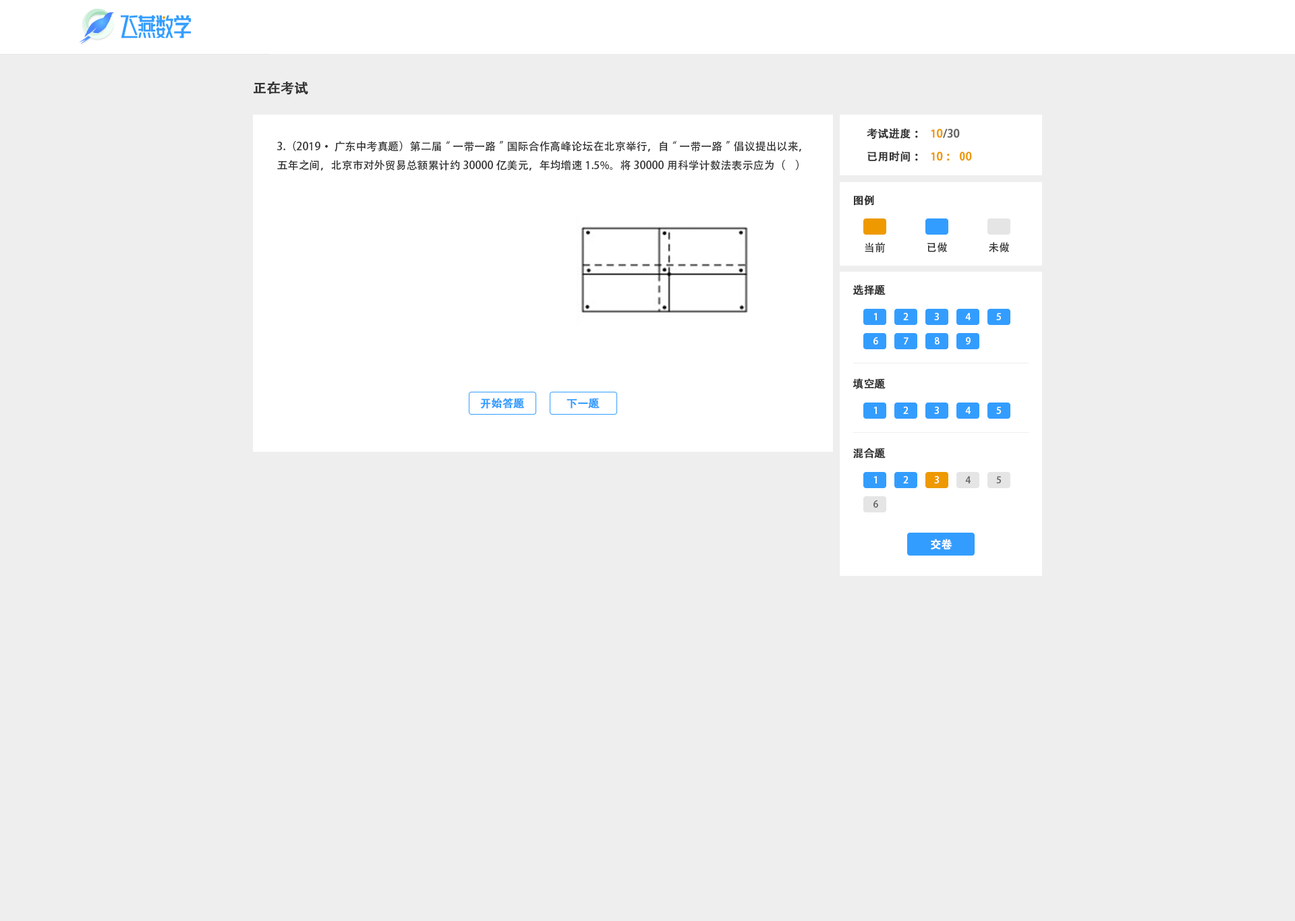
<style>
.page{position:relative;width:1295px;height:921px;background:#eeeeee}
.page>*{position:absolute;margin:0}
.t1{font:13.5px "AdobeHeitiStd-Regular";color:#333333;font-weight:bold}
.t2{font:10.8px "AdobeHeitiStd-Regular";color:#333333;font-weight:bold}
.t3{font:10.8px "AdobeHeitiStd-Regular";color:#666666;font-weight:bold}
.t4{font:10.8px "AdobeHeitiStd-Regular";color:#ee9900;font-weight:bold}
.t5{font:10.8px "AdobeHeitiStd-Regular";color:#333333}
.t6{font:9.4px "AdobeHeitiStd-Regular";color:#ffffff}
.t7{font:10.8px "AdobeHeitiStd-Regular";color:#339dff;font-weight:bold}
.t8{font:9.4px "AdobeHeitiStd-Regular";color:#666666}
.t9{font:10.8px "AdobeHeitiStd-Regular";color:#ffffff;font-weight:bold}
</style>
<div class="page">
<p class="t1" style="left:254px;top:81px;width:54px;height:14px">正在考试</p>
<p class="t2" style="left:866px;top:128px;width:52px;height:12px">考试进度：</p>
<p class="t3" style="left:931px;top:129px;width:29px;height:9px"><span class="t4">１0</span>/30</p>
<p class="t5" style="left:276px;top:141px;width:525px;height:30px">3.（2019·广东中考真题）第二届“一带一路”国际合作高峰论坛在北京举行，自“一带一路”倡议提出以来，五年之间，北京市对外贸易总额累计约30000亿美元，年均增速1.5%。将30000用科学计数法表示应为（    ）</p>
<p class="t2" style="left:867px;top:151px;width:51px;height:11px">已用时间：</p>
<p class="t4" style="left:931px;top:152px;width:41px;height:9px">１0：00</p>
<p class="t2" style="left:853px;top:195px;width:21px;height:11px">图例</p>
<p class="t5" style="left:864px;top:242px;width:21px;height:11px">当前</p>
<p class="t5" style="left:927px;top:242px;width:20px;height:11px">已做</p>
<p class="t5" style="left:988px;top:242px;width:21px;height:11px">未做</p>
<p class="t2" style="left:853px;top:285px;width:32px;height:10px">选择题</p>
<p class="t6" style="left:873px;top:313px;width:4px;height:7px">1</p>
<p class="t6" style="left:903px;top:313px;width:5px;height:7px">2</p>
<p class="t6" style="left:934px;top:313px;width:5px;height:7px">3</p>
<p class="t6" style="left:965px;top:313px;width:5px;height:7px">4</p>
<p class="t6" style="left:996px;top:313px;width:5px;height:7px">5</p>
<p class="t6" style="left:873px;top:337px;width:5px;height:8px">6</p>
<p class="t6" style="left:904px;top:337px;width:4px;height:8px">7</p>
<p class="t6" style="left:935px;top:337px;width:4px;height:8px">8</p>
<p class="t6" style="left:966px;top:337px;width:4px;height:8px">9</p>
<p class="t2" style="left:852px;top:378px;width:33px;height:11px">填空题</p>
<p class="t7" style="left:480px;top:398px;width:45px;height:11px">开始答题</p>
<p class="t7" style="left:566px;top:398px;width:33px;height:11px">下一题</p>
<p class="t6" style="left:873px;top:407px;width:4px;height:7px">1</p>
<p class="t6" style="left:903px;top:407px;width:5px;height:7px">2</p>
<p class="t6" style="left:934px;top:407px;width:5px;height:7px">3</p>
<p class="t6" style="left:965px;top:407px;width:5px;height:7px">4</p>
<p class="t6" style="left:996px;top:407px;width:5px;height:7px">5</p>
<p class="t2" style="left:853px;top:448px;width:32px;height:11px">混合题</p>
<p class="t6" style="left:873px;top:476px;width:4px;height:7px">1</p>
<p class="t6" style="left:903px;top:476px;width:5px;height:7px">2</p>
<p class="t6" style="left:934px;top:476px;width:5px;height:7px">3</p>
<p class="t8" style="left:965px;top:476px;width:5px;height:7px">4</p>
<p class="t8" style="left:996px;top:476px;width:5px;height:7px">5</p>
<p class="t8" style="left:873px;top:500px;width:5px;height:8px">6</p>
<p class="t9" style="left:931px;top:539px;width:21px;height:11px">交卷</p>
</div>
